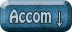
<style>
.page{position:relative;width:72px;height:32px}
.page>*{position:absolute;margin:0}
.t1{font:16.8px "HoboStd";color:#b3cad6;scale:0.83 1}
.t2{font:16.8px "ArialMT";color:#b3cad6;scale:0.83 1}
</style>
<div class="page">
<p class="t1" style="left:9px;top:9px;width:54px;height:18px">Accom <span class="t2">↓</span></p>
</div>
